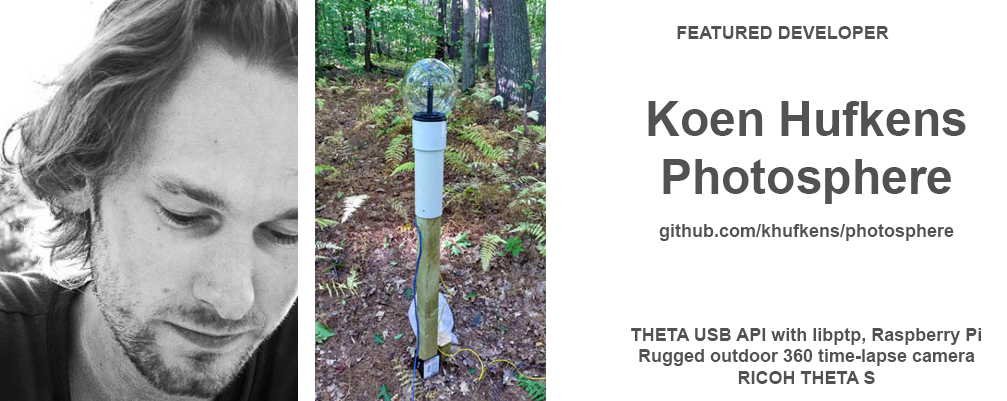
<style>
.page{position:relative;width:1007px;height:401px;background:#ffffff}
.page>*{position:absolute;margin:0}
.t1{font:18px "Arial-BoldMT";color:#535252}
.t2{font:48px "Arial-BoldMT";color:#535252}
</style>
<div class="page">
<p class="t1" style="left:677px;top:26px;width:212px;height:13px">FEATURED DEVELOPER</p>
<p class="t1" style="left:648px;top:101px;width:318px;height:140px;text-align:center"><span class="t2">Koen Hufkens <br>Photosphere<br></span><br>github.com/khufkens/photosphere</p>
<p class="t1" style="left:631px;top:328px;width:350px;height:56px;text-align:center">THETA USB API with libptp, Raspberry Pi<br>Rugged outdoor 360 time-lapse camera<br>RICOH THETA S</p>
</div>
